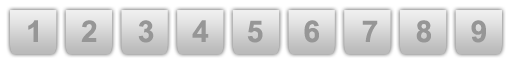
<style>
.page{position:relative;width:512px;height:64px;background:#ffffff}
.page>*{position:absolute;margin:0}
.t1{font:30px "Arial-BoldMT";color:#969696;text-transform:uppercase}
</style>
<div class="page">
<p class="t1" style="left:28px;top:20px;width:458px;height:23px">1     2      3     4     5     6     7     8     9</p>
</div>
